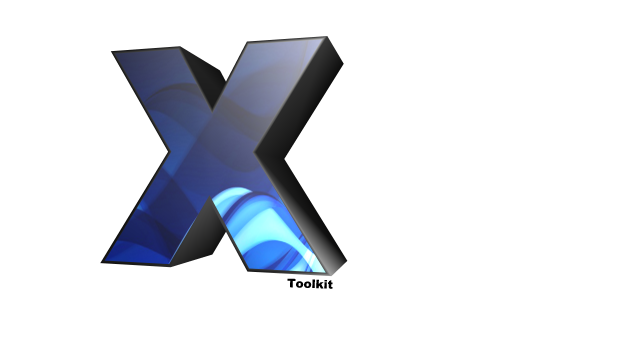
<style>
.page{position:relative;width:640px;height:360px;background:#ffffff}
.page>*{position:absolute;margin:0}
.t1{font:12px "Arial-Black";color:#000000}
</style>
<div class="page">
<p class="t1" style="left:287px;top:278px;width:46px;height:11px;rotate:2deg">Toolkit</p>
</div>
